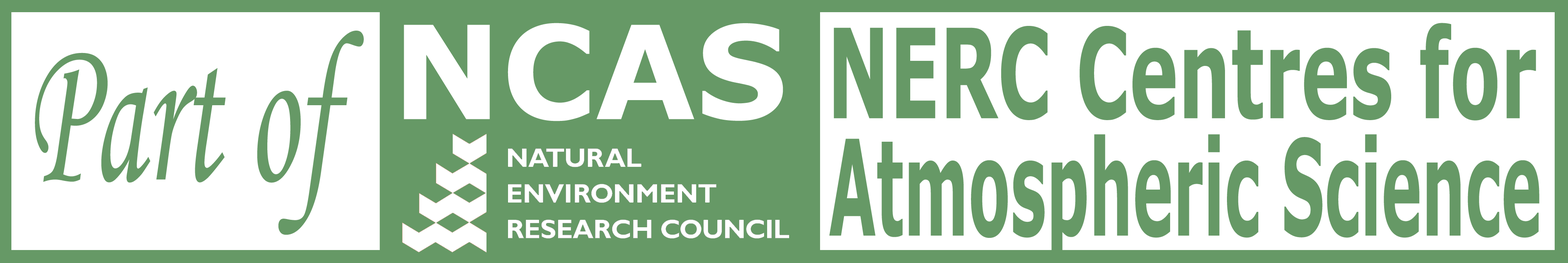
<style>
.page{position:relative;width:1568px;height:263px;background:#ffffff}
.page>*{position:absolute;margin:0}
.t1{font:129.4px "Verdana-Bold";color:#ffffff}
.t2{font:124.2px "Verdana-Bold";color:#669966;scale:0.59 1}
.t3{font:215.6px "MonotypeCorsiva";color:#669966;scale:0.57 1}
.t4{font:132.9px "Verdana-Bold";color:#669966;scale:0.46 1}
</style>
<div class="page">
<p class="t1" style="left:404px;top:23px;width:379px;height:98px">NCAS</p>
<p class="t2" style="left:834px;top:23px;width:702px;height:97px">NERC Centres for</p>
<p class="t3" style="left:35px;top:31px;width:329px;height:203px">Part of</p>
<p class="t4" style="left:829px;top:134px;width:710px;height:128px">Atmospheric Science</p>
</div>
